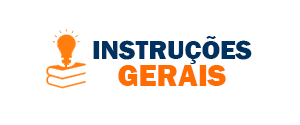
<style>
.page{position:relative;width:300px;height:125px;background:#ffffff}
.page>*{position:absolute;margin:0}
.t1{font:26.9px "FranklinGothic-Heavy";color:#003261}
.t2{font:31px "FranklinGothic-Heavy";color:#ff6c00}
</style>
<div class="page">
<p class="t1" style="left:93px;top:36px;width:159px;height:28px">INSTRUÇÕES</p>
<p class="t2" style="left:118px;top:65px;width:108px;height:21px">GERAIS</p>
</div>
